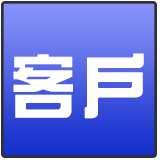
<style>
.page{position:relative;width:160px;height:160px;background:#ffffff}
.page>*{position:absolute;margin:0}
.t1{font:70.6px "DFZongYi-XB";letter-spacing:0.08em;color:#ffffff;scale:0.93 1}
</style>
<div class="page">
<p class="t1" style="left:13px;top:53px;width:131px;height:66px">客戶</p>
</div>
